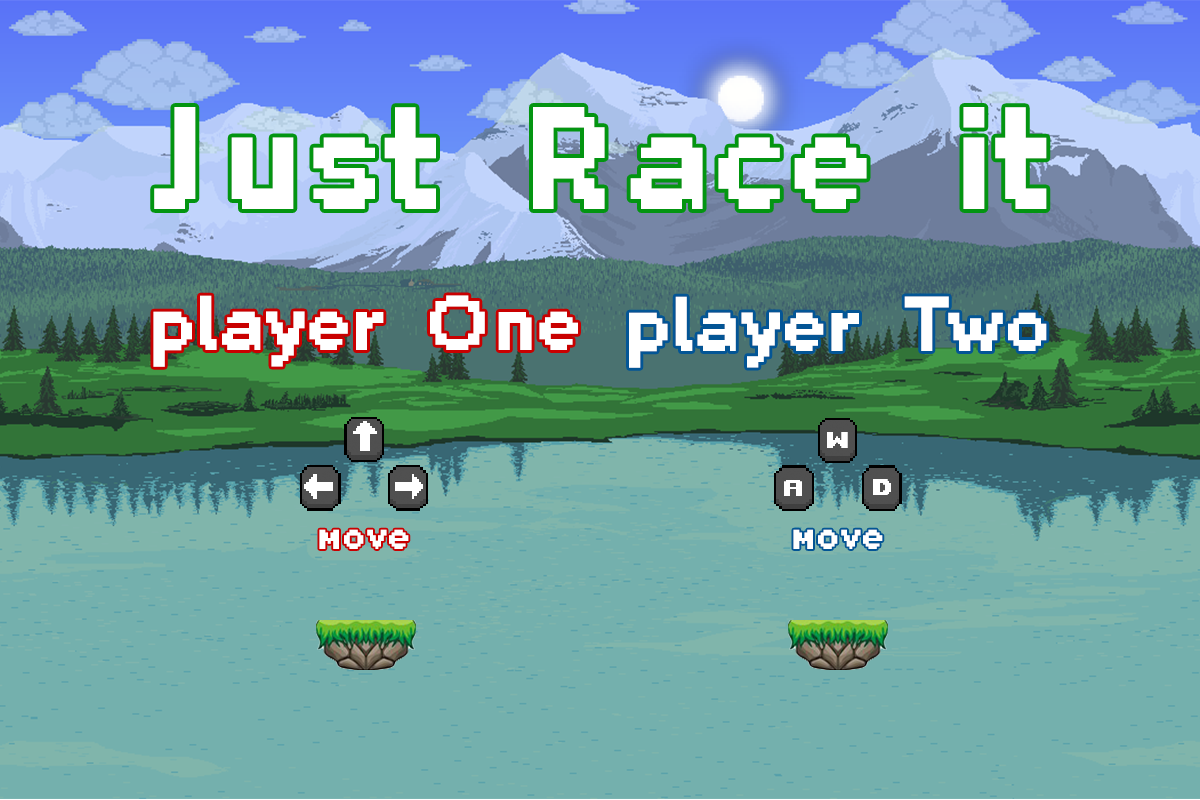
<style>
.page{position:relative;width:1200px;height:800px;background:#74b0ad}
.page>*{position:absolute;margin:0}
.t1{font:150px "Planes_ValMore-Bold";color:#ffffff}
.t2{font:80px "Planes_ValMore-Bold";color:#ffffff}
.t3{font:40px "Planes_ValMore-Bold";color:#ffffff}
</style>
<div class="page">
<p class="t1" style="left:154px;top:107px;width:893px;height:102px">Just Race it</p>
<p class="t2" style="left:153px;top:295px;width:425px;height:72px">player One</p>
<p class="t2" style="left:629px;top:296px;width:418px;height:72px">player Two</p>
<p class="t3" style="left:319px;top:529px;width:90px;height:20px">move</p>
<p class="t3" style="left:793px;top:529px;width:90px;height:20px">move</p>
</div>
